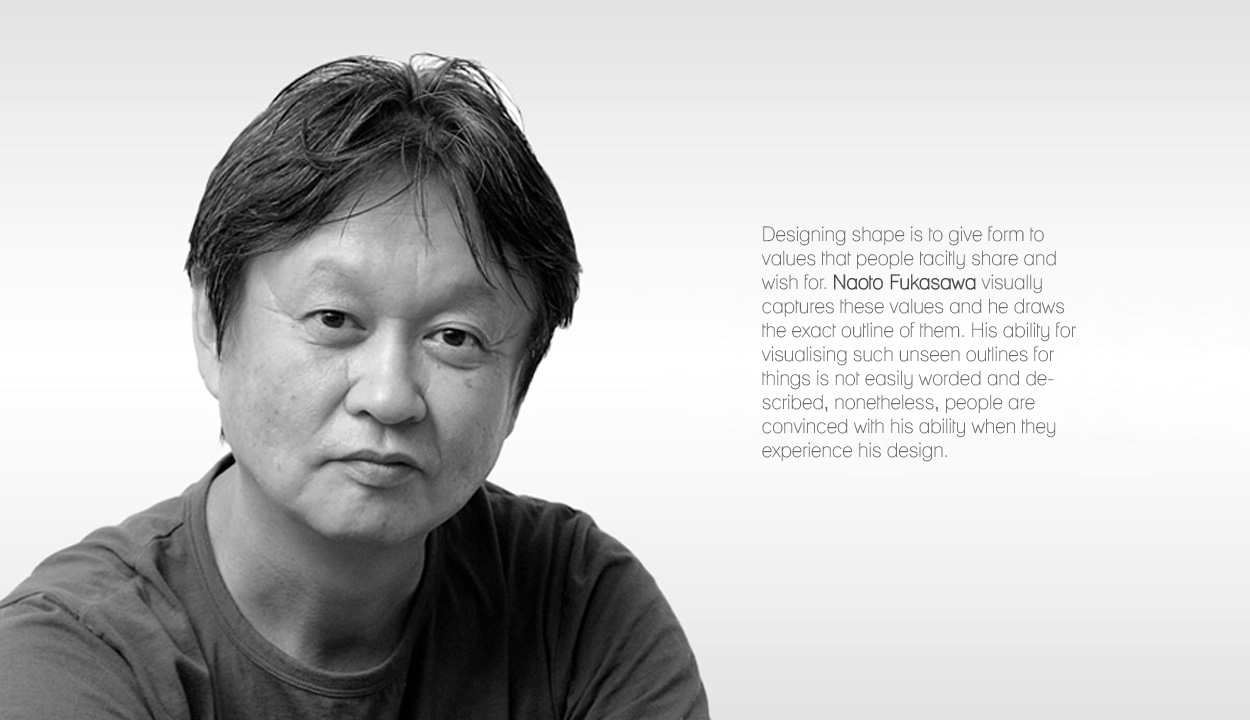
<style>
.page{position:relative;width:1250px;height:720px}
.page>*{position:absolute;margin:0}
.t1{font:20px "Lane-Narrow";color:#58595b}
.t2{font:20px "Lane-Cane";color:#414042}
</style>
<div class="page">
<p class="t1" style="left:761px;top:226px;width:315px;height:236px">Designing shape is to give form to values that people tacitly share and wish for. <span class="t2">Naoto Fukasawa</span> visually captures these values and he draws the exact outline of them. His ability for visualising such unseen outlines for things is not easily worded and described, nonetheless, people are convinced with his ability when they experience his design.</p>
</div>
